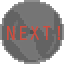
<style>
.page{position:relative;width:64px;height:64px;background:#636363}
.page>*{position:absolute;margin:0}
.t1{font:20px "OratorStd";color:#d04d3e}
</style>
<div class="page">
<p class="t1" style="left:7px;top:26px;width:53px;height:14px">NEXT!</p>
</div>
